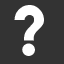
<style>
.page{position:relative;width:64px;height:64px;background:#333333}
.page>*{position:absolute;margin:0}
.t1{font:63px "LemonMilk";letter-spacing:-0.02em;color:#ffffff}
</style>
<div class="page">
<p class="t1" style="left:14px;top:5px;width:30px;height:51px">?</p>
</div>
